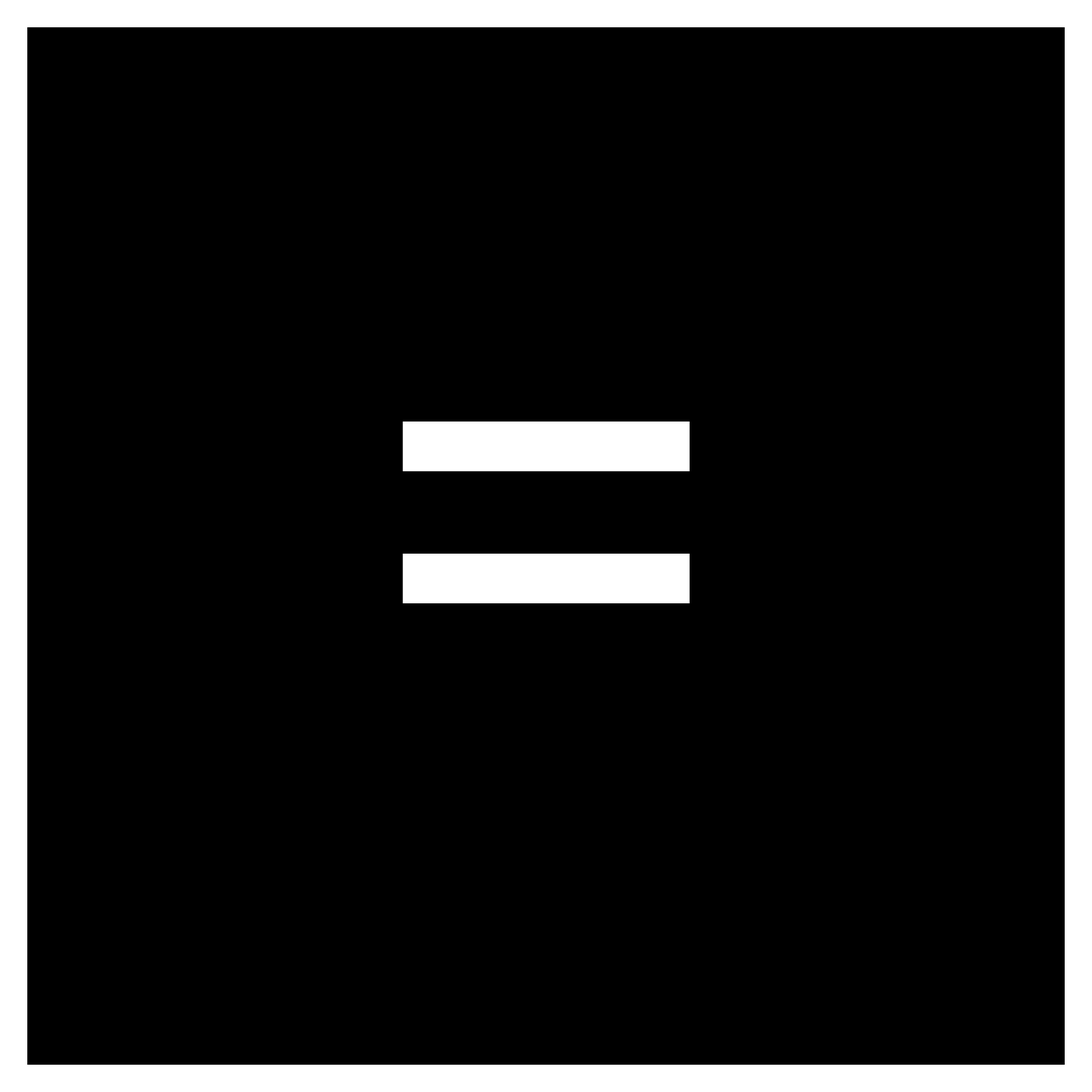
<style>
.page{position:relative;width:1092px;height:1092px;background:#000000}
.page>*{position:absolute;margin:0}
.t1{font:606.7px "ArialMT";color:#ffffff}
</style>
<div class="page">
<p class="t1" style="left:402px;top:422px;width:288px;height:181px">=</p>
</div>
